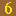
<style>
.page{position:relative;width:16px;height:16px;background:#996633}
.page>*{position:absolute;margin:0}
.t1{font:18px "Sylfaen";color:#f5e814}
</style>
<div class="page">
<p class="t1" style="left:5px;top:2px;width:7px;height:12px">6</p>
</div>
